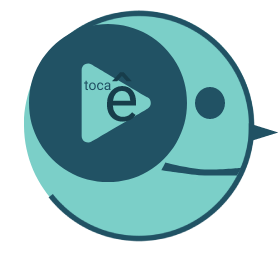
<style>
.page{position:relative;width:279px;height:266px;background:#ffffff}
.page>*{position:absolute;margin:0}
.t1{font:65px "Roboto-Regular";color:#173d4b}
.t2{font:14px "Roboto-Regular";color:#215264}
</style>
<div class="page">
<p class="t1" style="left:106px;top:72px;width:31px;height:50px">ê</p>
<p class="t2" style="left:84px;top:80px;width:27px;height:11px">toca</p>
</div>
